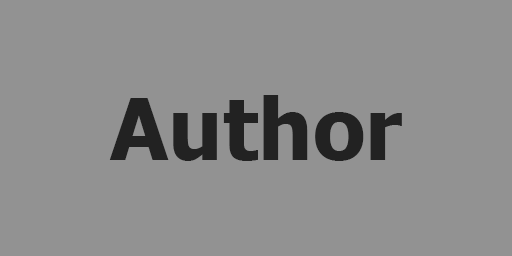
<style>
.page{position:relative;width:512px;height:256px;background:#929292}
.page>*{position:absolute;margin:0}
.t1{font:85.3px "Tahoma-Bold";color:#222222}
</style>
<div class="page">
<p class="t1" style="left:109px;top:95px;width:293px;height:66px">Author</p>
</div>
